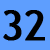
<style>
.page{position:relative;width:50px;height:50px;background:#5e9efe}
.page>*{position:absolute;margin:0}
.t1{font:41.7px "TrebuchetMS";color:#000000;font-weight:bold}
</style>
<div class="page">
<p class="t1" style="left:3px;top:10px;width:42px;height:31px">32</p>
</div>
